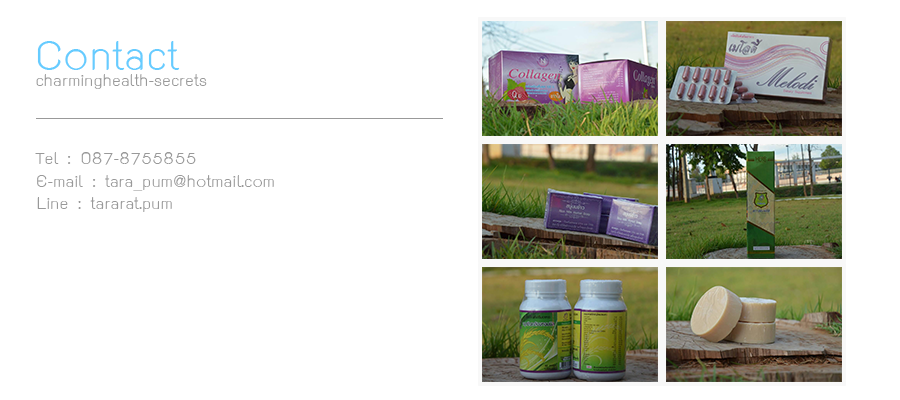
<style>
.page{position:relative;width:900px;height:400px;background:#ffffff}
.page>*{position:absolute;margin:0}
.t1{font:60px "THK2DJuly8";color:#66ccff}
.t2{font:24px "THK2DJuly8";color:#999999}
</style>
<div class="page">
<p class="t1" style="left:37px;top:41px;width:143px;height:29px">Contact</p>
<p class="t2" style="left:36px;top:74px;width:171px;height:15px">charminghealth-secrets</p>
<p class="t2" style="left:35px;top:152px;width:161px;height:13px">Tel : 087-8755855</p>
<p class="t2" style="left:37px;top:175px;width:237px;height:16px">E-mail : tara_pum@hotmail.com</p>
<p class="t2" style="left:37px;top:197px;width:135px;height:15px">Line : tararat.pum</p>
</div>
